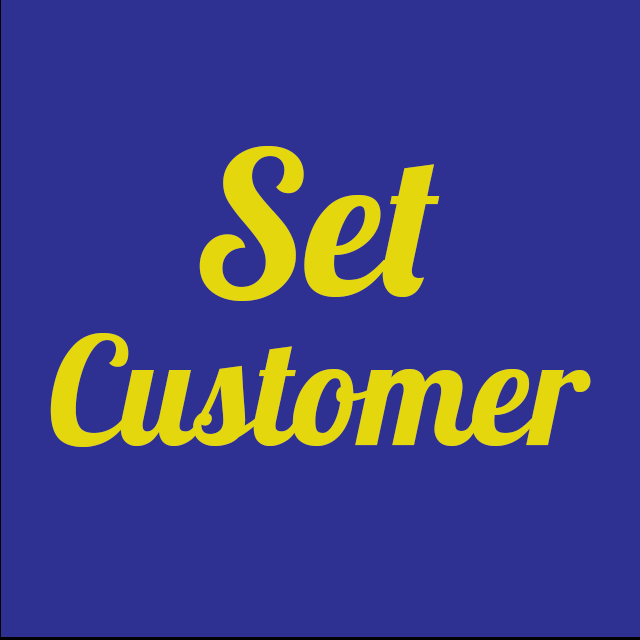
<style>
.page{position:relative;width:640px;height:640px;background:#2e3192}
.page>*{position:absolute;margin:0}
.t1{font:200px "Lobster-Regular";color:#e4d70d}
.t2{font:150px "Lobster-Regular";color:#e4d70d}
</style>
<div class="page">
<p class="t1" style="left:199px;top:146px;width:241px;height:155px">Set</p>
<p class="t2" style="left:50px;top:333px;width:541px;height:114px">Customer</p>
</div>
